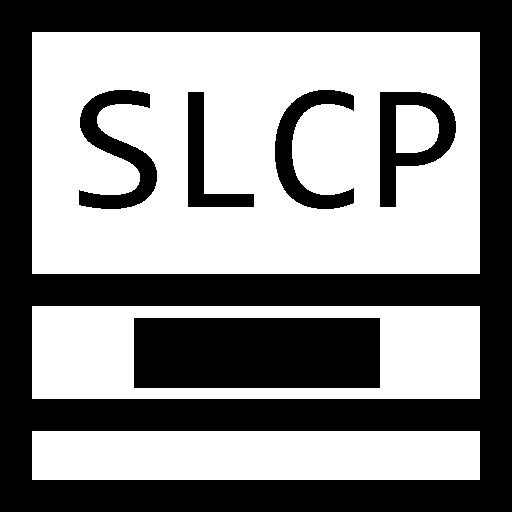
<style>
.page{position:relative;width:512px;height:512px;background:#ffffff}
.page>*{position:absolute;margin:0}
.t1{font:180px "Consolas";color:#000000}
</style>
<div class="page">
<p class="t1" style="left:79px;top:90px;width:377px;height:119px">SLCP</p>
</div>
